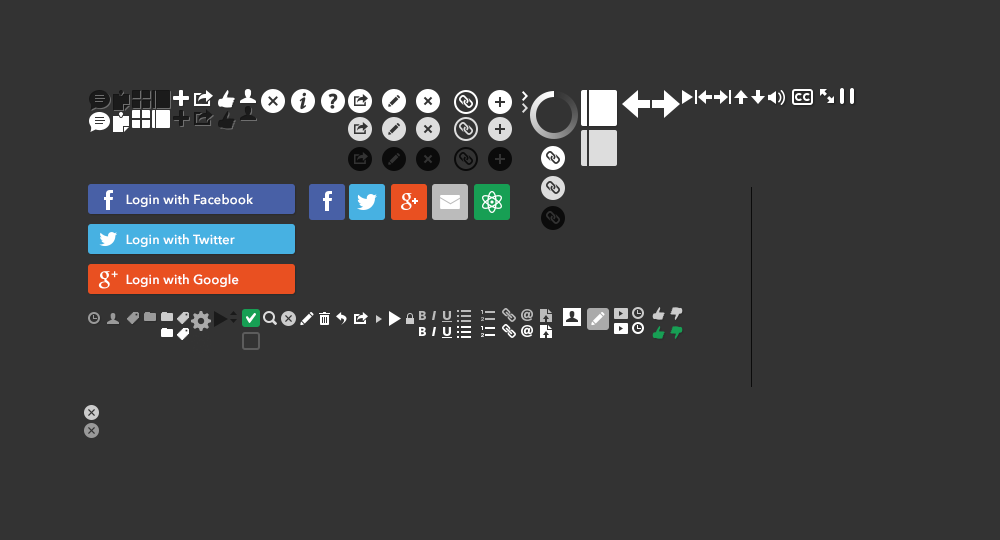
<style>
.page{position:relative;width:1000px;height:540px;background:#333333}
.page>*{position:absolute;margin:0}
.t1{font:13px/40px "AvenirNext-DemiBold";letter-spacing:0.01em;color:#ffffff}
</style>
<div class="page">
<p class="t1" style="left:126px;top:194px;width:127px;height:93px">Login with Facebook<br>Login with Twitter<br>Login with Google</p>
</div>
